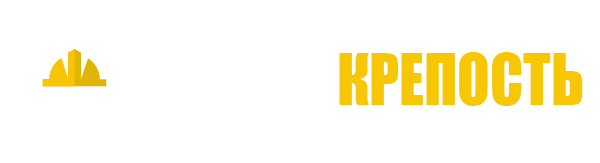
<style>
.page{position:relative;width:600px;height:163px;background:#ffffff}
.page>*{position:absolute;margin:0}
.t1{font:66px "Impact";color:#f7c605;scale:0.91 1}
.t2{font:66px "Impact";color:#ffffff;scale:0.91 1}
</style>
<div class="page">
<p class="t1" style="left:172px;top:42px;width:411px;height:64px"><span class="t2">СТРОЙ </span>КРЕПОСТЬ</p>
</div>
